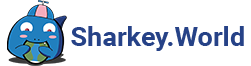
<style>
.page{position:relative;width:251px;height:66px;background:#ffffff}
.page>*{position:absolute;margin:0}
.t1{font:25.6px "Roboto-Bold";color:#264287;scale:1.05 1}
</style>
<div class="page">
<p class="t1" style="left:71px;top:26px;width:173px;height:25px">Sharkey.World</p>
</div>
